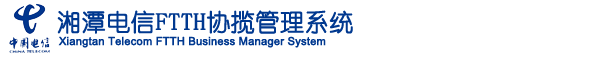
<style>
.page{position:relative;width:600px;height:57px;background:#ffffff}
.page>*{position:absolute;margin:0}
.t1{font:24px "YouYuan";color:#00388f;font-weight:bold}
.t2{font:11px "ArialMT";color:#00388f;font-weight:bold}
</style>
<div class="page">
<p class="t1" style="left:57px;top:10px;width:296px;height:24px">湘潭电信FTTH协揽管理系统</p>
<p class="t2" style="left:58px;top:36px;width:268px;height:12px">Xiangtan Telecom FTTH Business Manager System</p>
</div>
